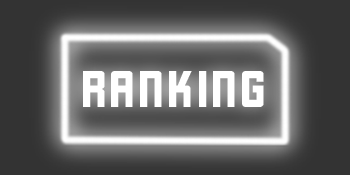
<style>
.page{position:relative;width:350px;height:175px;background:#333333}
.page>*{position:absolute;margin:0}
.t1{font:50px "Cornerstone";color:#ffffff}
</style>
<div class="page">
<p class="t1" style="left:83px;top:71px;width:181px;height:36px">ranking</p>
</div>
